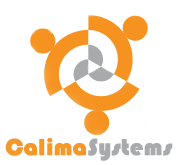
<style>
.page{position:relative;width:178px;height:165px;background:#ffffff}
.page>*{position:absolute;margin:0}
.t1{font:24px "Bauhaus93";color:#a8aaac;font-weight:bold}
.t2{font:24px "Bauhaus93";color:#f69829;font-weight:bold}
</style>
<div class="page">
<p class="t1" style="left:5px;top:138px;width:168px;height:23px"><span class="t2">Calima</span>Systems</p>
</div>
